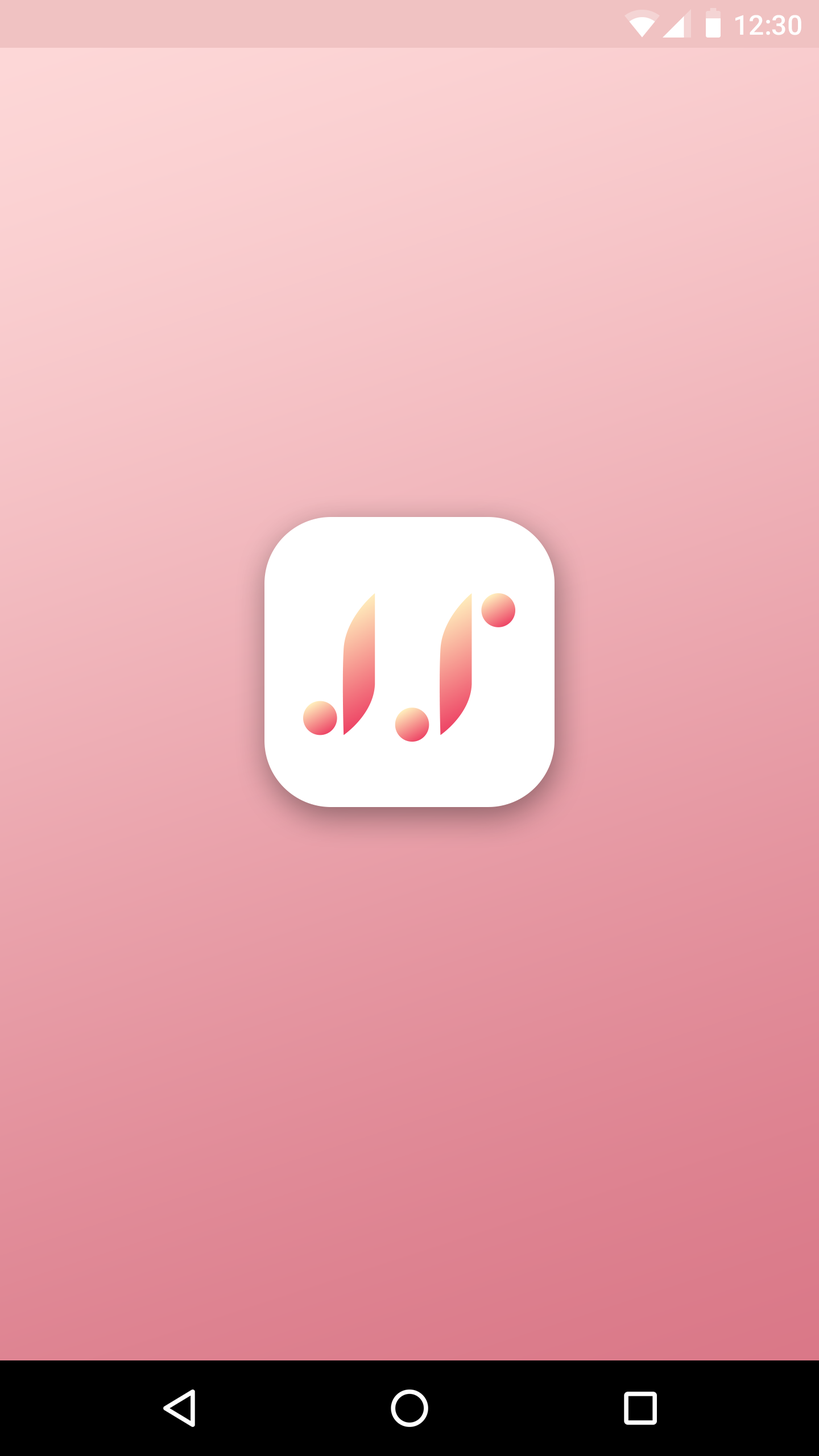
<style>
.page{position:relative;width:819px;height:1456px}
.page>*{position:absolute;margin:0}
.t1{font:27.3px "Roboto-Medium";color:#ffffff}
</style>
<div class="page">
<p class="t1" style="left:735px;top:15px;width:66px;height:20px">12:30</p>
</div>
